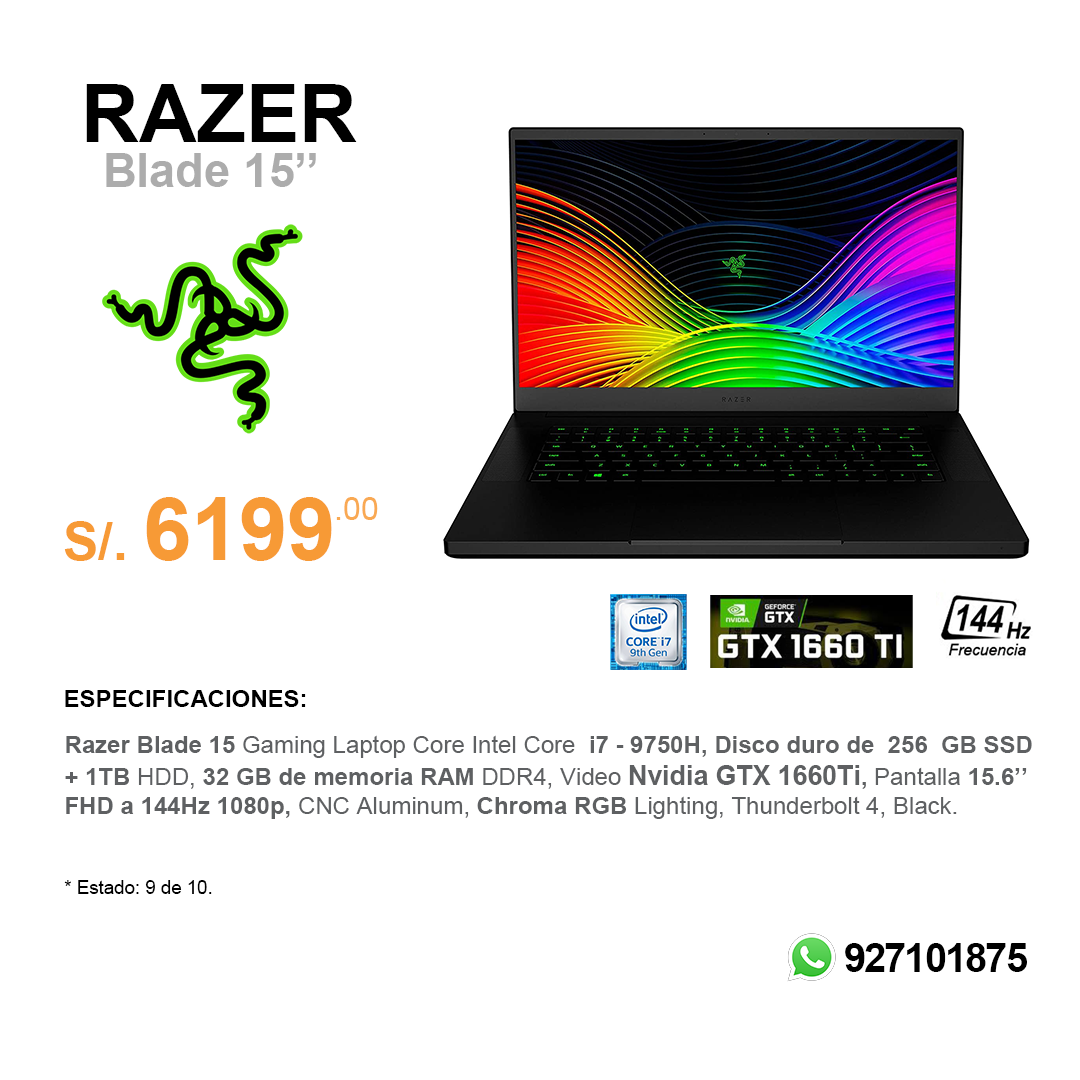
<style>
.page{position:relative;width:1080px;height:1080px;background:#ffffff}
.page>*{position:absolute;margin:0}
.t1{font:80px "Arial-BoldMT";color:#000000}
.t2{font:46.7px "Arial-BoldMT";color:#acacac}
.t3{font:86.7px "Arial-BoldMT";color:#f79a36}
.t4{font:53.3px "Arial-BoldMT";color:#f79a36}
.t5{font:32px "ArialMT";color:#f9a953}
.t6{font:24px "Arial-BoldMT";color:#000000}
.t7{font:24px "Arial-BoldMT";color:#5e6062}
.t8{font:24px "ArialMT";color:#5e6062}
.t9{font:26.7px "Arial-BoldMT";color:#5e6062}
.t10{font:18.7px "ArialMT";color:#000000}
.t11{font:40px "Arial-BoldMT";letter-spacing:-0.05em;color:#000000}
</style>
<div class="page">
<p class="t1" style="left:86px;top:84px;width:271px;height:58px">RAZER</p>
<p class="t2" style="left:106px;top:153px;width:210px;height:34px">Blade 15’’</p>
<p class="t3" style="left:64px;top:497px;width:268px;height:64px"><span class="t4">S/. </span>6199</p>
<p class="t5" style="left:336px;top:497px;width:42px;height:23px">.00</p>
<p class="t6" style="left:65px;top:690px;width:241px;height:17px">ESPECIFICACIONES:</p>
<p class="t7" style="left:65px;top:735px;width:967px;height:84px">Razer Blade 15<span class="t8"> Gaming Laptop Core Intel Core  </span>i7 - 9750H, Disco duro de  256  GB SSD<br>+ 1TB <span class="t8">HDD, </span>32 GB de memoria RAM <span class="t8">DDR4, Video </span><span class="t9">Nvidia GTX 1660Ti</span>, <span class="t8">Pantalla </span>15.6’’ <br>FHD a 144Hz 1080p, <span class="t8">CNC Aluminum, </span>Chroma RGB <span class="t8">Lighting, Thunderbolt 4, Black.</span></p>
<p class="t10" style="left:64px;top:880px;width:148px;height:14px">* Estado: 9 de 10.</p>
<p class="t11" style="left:845px;top:943px;width:182px;height:29px">927101875</p>
</div>
